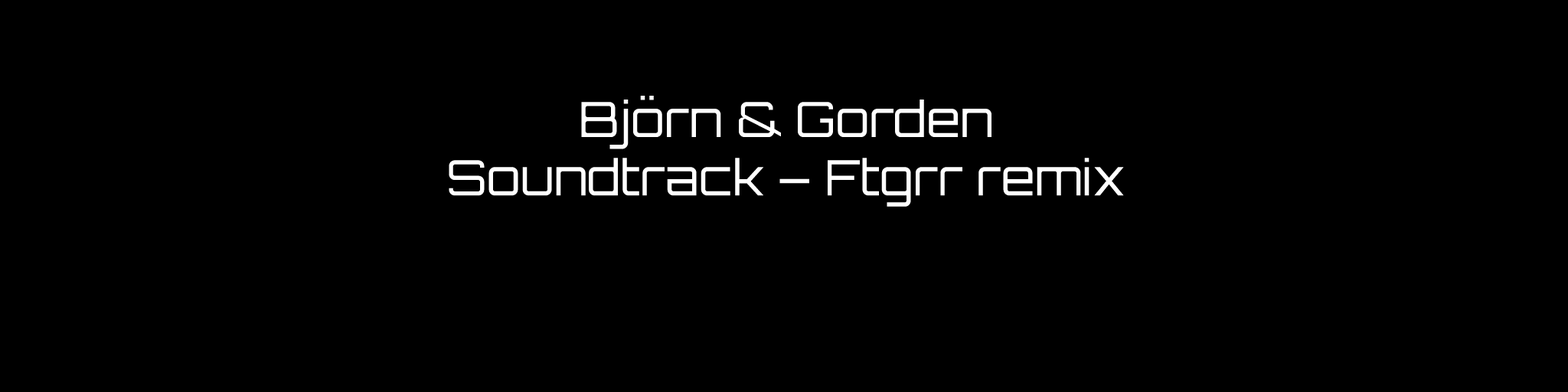
<style>
.page{position:relative;width:1568px;height:392px;background:#000000}
.page>*{position:absolute;margin:0}
.t1{font:48.6px "Orbitron-Light";color:#ffffff}
</style>
<div class="page">
<p class="t1" style="left:449px;top:96px;width:675px;height:111px;text-align:center">Björn &amp; Gorden<br>Soundtrack – Ftgrr remix</p>
</div>
